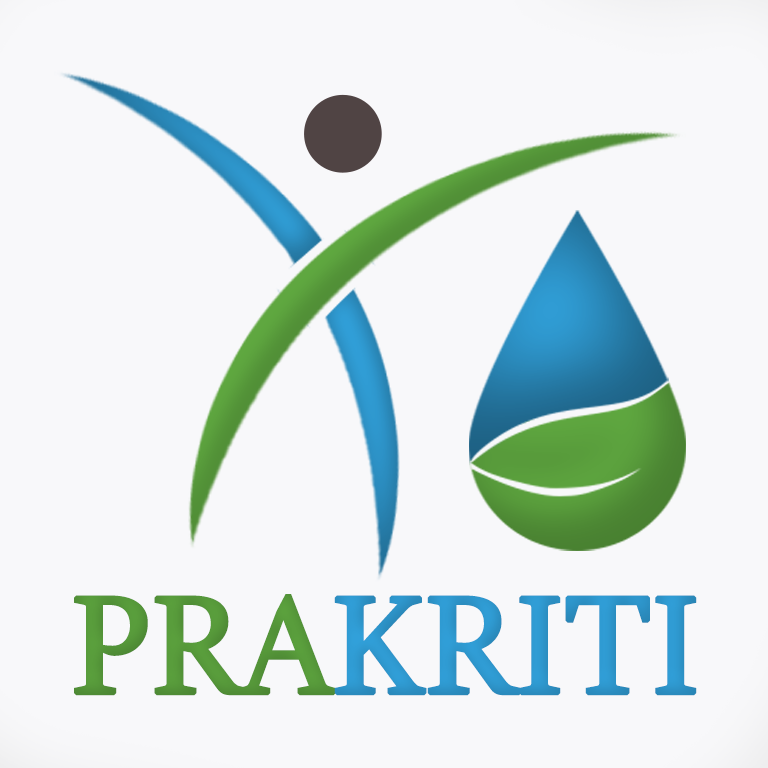
<style>
.page{position:relative;width:768px;height:768px;background:#f8f8fa}
.page>*{position:absolute;margin:0}
.t1{font:155.5px "SitkaBanner";color:#33a7e3;font-weight:bold}
.t2{font:155.5px "SitkaBanner";color:#5fa840;font-weight:bold}
</style>
<div class="page">
<p class="t1" style="left:74px;top:594px;width:623px;height:102px"><span class="t2">PRA</span>KRITI</p>
</div>
